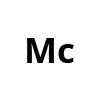
<style>
.page{position:relative;width:100px;height:100px;background:#ffffff}
.page>*{position:absolute;margin:0}
.t1{font:35px "OpenSans-Bold";color:#000000}
</style>
<div class="page">
<p class="t1" style="left:27px;top:38px;width:47px;height:25px">Mc</p>
</div>
